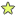
<style>
.page{position:relative;width:16px;height:16px;background:#ffffff}
.page>*{position:absolute;margin:0}
.t1{font:14px "SimSun";color:#e9ff70}
</style>
<div class="page">
<p class="t1" style="left:1px;top:2px;width:14px;height:12px">★</p>
</div>
